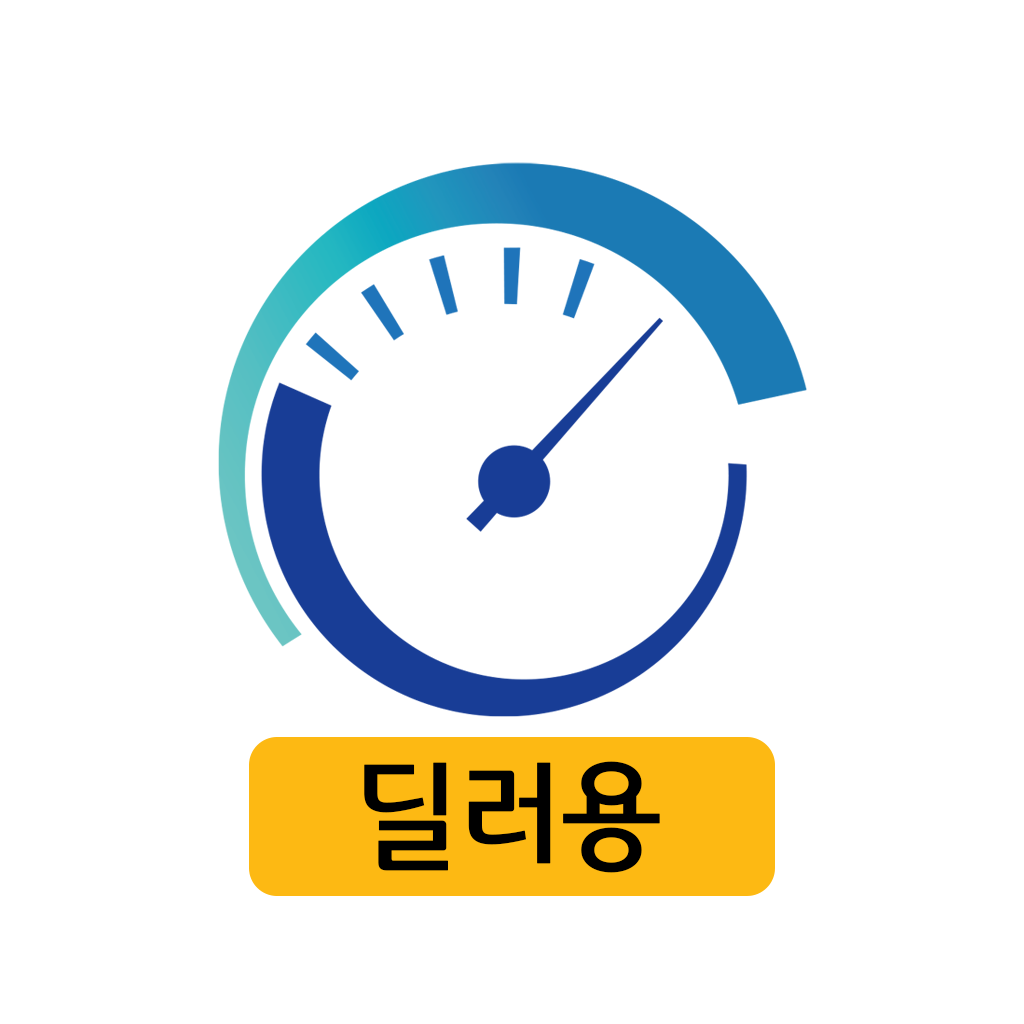
<style>
.page{position:relative;width:1024px;height:1024px;background:#ffffff}
.page>*{position:absolute;margin:0}
.t1{font:117.2px "KBFGDisplay-Medium";letter-spacing:-0.02em;color:#000000;font-weight:bold}
</style>
<div class="page">
<p class="t1" style="left:364px;top:761px;width:296px;height:112px">딜러용</p>
</div>
